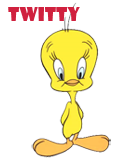
<style>
.page{position:relative;width:140px;height:162px;background:#ffffff}
.page>*{position:absolute;margin:0}
.t1{font:18px "ShowcardGothic-Reg";color:#d0213e}
</style>
<div class="page">
<p class="t1" style="left:8px;top:7px;width:72px;height:14px">Twitty</p>
</div>
